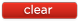
<style>
.page{position:relative;width:79px;height:21px}
.page>*{position:absolute;margin:0}
.t1{font:11.9px "GothamBook";color:#ffffff}
</style>
<div class="page">
<p class="t1" style="left:24px;top:4px;width:29px;height:10px">clear</p>
</div>
